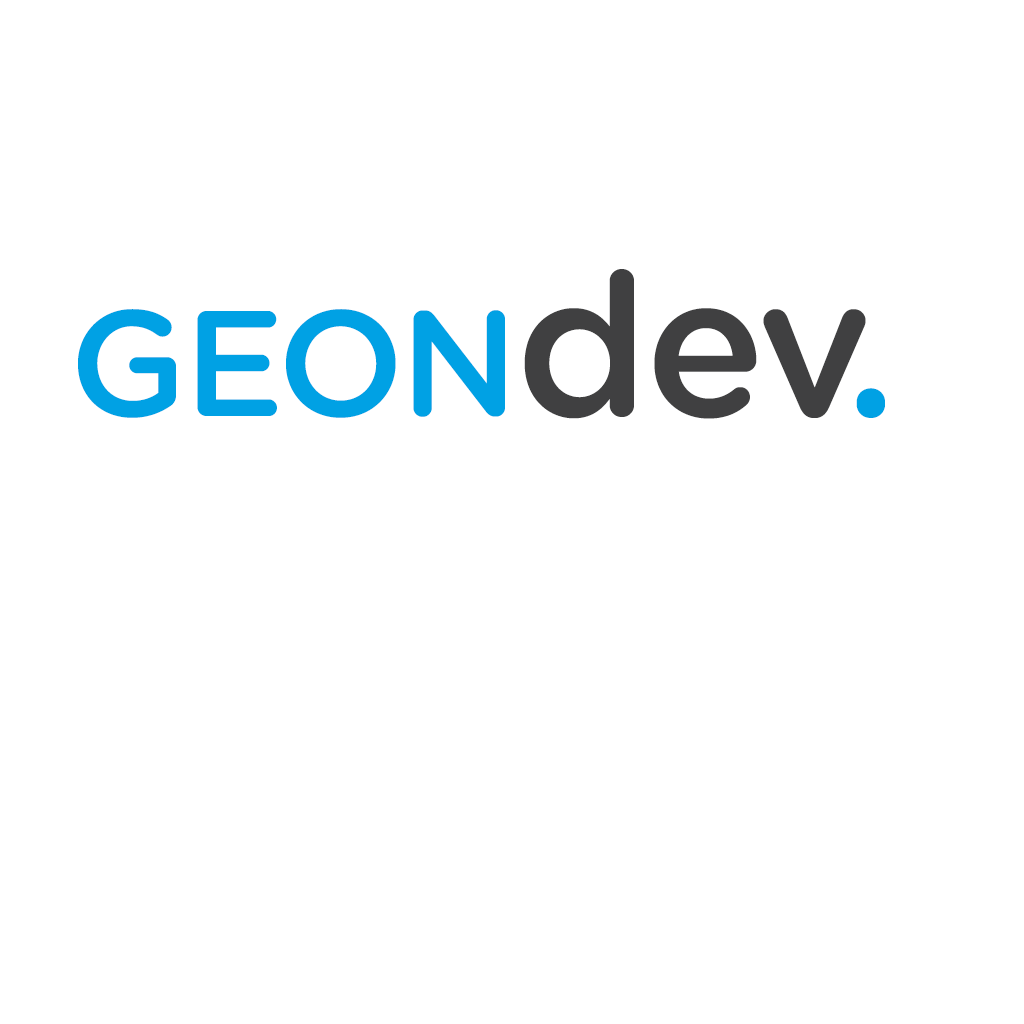
<style>
.page{position:relative;width:1024px;height:1024px;background:#ffffff}
.page>*{position:absolute;margin:0}
.t1{font:200px "GothamRounded-Medium";letter-spacing:-0.01em;color:#404041}
.t2{font:150px "GothamRounded-Medium";letter-spacing:-0.01em;color:#00a1e4}
.t3{font:200px "GothamRounded-Medium";color:#00a1e4}
</style>
<div class="page">
<p class="t1" style="left:524px;top:269px;width:342px;height:150px">dev</p>
<p class="t2" style="left:78px;top:309px;width:427px;height:109px">GEON</p>
<p class="t3" style="left:856px;top:388px;width:29px;height:30px">.</p>
</div>
